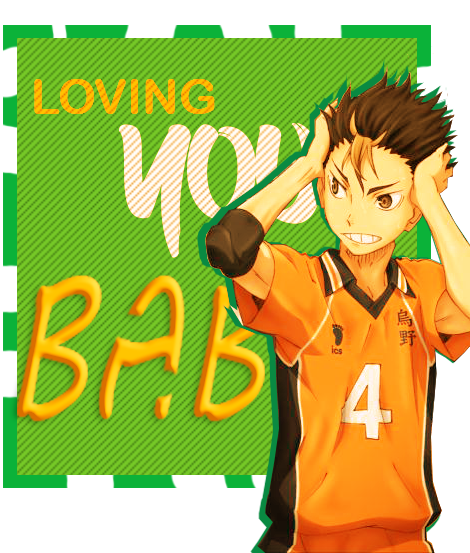
<style>
.page{position:relative;width:470px;height:553px}
.page>*{position:absolute;margin:0}
.t1{font:48px "ArialRoundedMTBold";color:#feb700}
.t2{font:140.3px "BoldBrush";scale:0.92 1}
</style>
<div class="page">
<p class="t1" style="left:34px;top:79px;width:181px;height:35px">LOVING</p>
<p class="t2" style="left:119px;top:123px;width:204px;height:135px">YOU</p>
</div>
